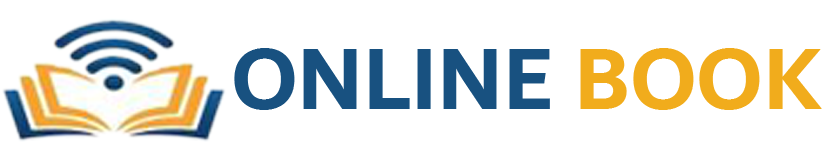
<style>
.page{position:relative;width:822px;height:159px;background:#ffffff}
.page>*{position:absolute;margin:0}
.t1{font:91.6px "Dubai-Bold";color:#185180}
.t2{font:91.6px "Dubai-Bold";color:#f1ac1c}
</style>
<div class="page">
<p class="t1" style="left:234px;top:48px;width:588px;height:62px">ONLINE <span class="t2">BOOK</span></p>
</div>
